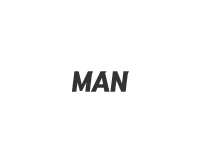
<style>
.page{position:relative;width:199px;height:150px;background:#ffffff}
.page>*{position:absolute;margin:0}
.t1{font:24px "KoreanRKT-R";color:#333333}
</style>
<div class="page">
<p class="t1" style="left:72px;top:71px;width:57px;height:21px">MAN</p>
</div>
